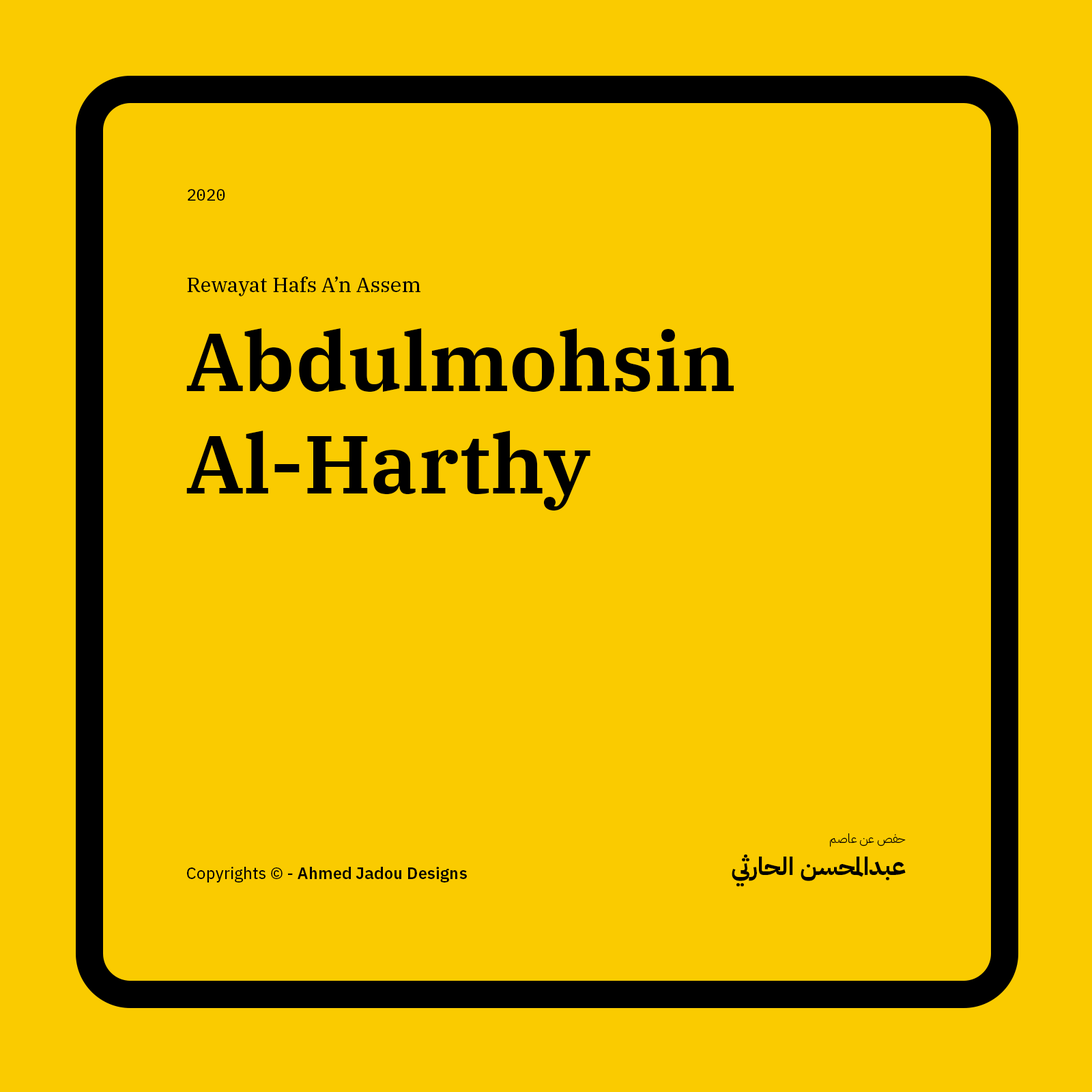
<style>
.page{position:relative;width:1092px;height:1092px;background:#facb00}
.page>*{position:absolute;margin:0}
.t1{font:16.4px "IBMPlexMono-Text";color:#000000}
.t2{font:20.5px "IBMPlexSerif-Text";color:#000000}
.t3{font:81.9px/102.7px "IBMPlexSerif-SemiBold";color:#000000}
.t4{font:12.3px "IBMPlexArabic-Light";color:#000000}
.t5{font:24.6px "IBMPlexArabic-Bold";color:#000000}
.t6{font:16.4px "IBMPlexSans-SemiBold";color:#000000}
.t7{font:16.4px "IBMPlexSans-Text";color:#000000}
</style>
<div class="page">
<p class="t1" style="left:188px;top:189px;width:37px;height:12px">2020</p>
<p class="t2" style="left:187px;top:276px;width:233px;height:20px">Rewayat Hafs A’n Assem</p>
<p class="t3" style="left:186px;top:328px;width:548px;height:183px">Abdulmohsin Al-Harthy</p>
<p class="t4" style="left:830px;top:833px;width:76px;height:14px">حفص عن عاصم</p>
<p class="t5" style="left:732px;top:854px;width:174px;height:33px">عبدالمحسن الحارثي</p>
<p class="t6" style="left:187px;top:867px;width:280px;height:15px"><span class="t7">Copyrights © - </span>Ahmed Jadou Designs</p>
</div>
